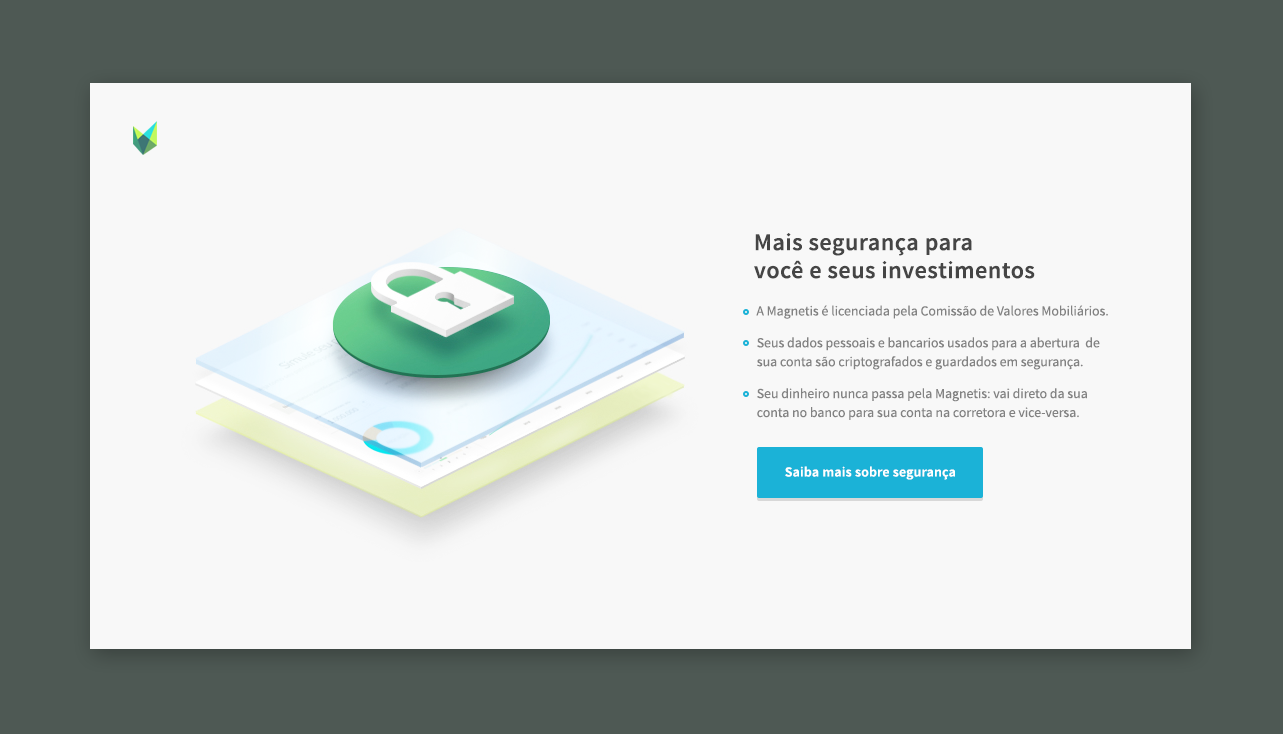
<style>
.page{position:relative;width:1283px;height:734px;background:#f8f8f8}
.page>*{position:absolute;margin:0}
.t1{font:24.1px/27.9px "SourceSansPro-Semibold";letter-spacing:0.02em;color:#454545}
.t2{font:13.8px "SourceSansPro-Regular";color:#828282}
.t3{font:13.8px/18.9px "SourceSansPro-Regular";color:#828282}
.t4{font:13.8px "SourceSansPro-Semibold";letter-spacing:0.02em;color:#ffffff}
</style>
<div class="page">
<p class="t1" style="left:754px;top:233px;width:281px;height:46px">Mais segurança para<br>você e seus investimentos</p>
<p class="t2" style="left:756px;top:305px;width:352px;height:14px">A Magnetis é licenciada pela Comissão de Valores Mobiliários.</p>
<p class="t3" style="left:757px;top:337px;width:343px;height:33px">Seus dados pessoais e bancarios usados para a abertura  de<br>sua conta são criptografados e guardados em segurança.</p>
<p class="t3" style="left:757px;top:388px;width:330px;height:32px">Seu dinheiro nunca passa pela Magnetis: vai direto da sua<br>conta no banco para sua conta na corretora e vice-versa.</p>
<p class="t4" style="left:785px;top:466px;width:170px;height:14px">Saiba mais sobre segurança</p>
</div>
